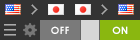
<style>
.page{position:relative;width:140px;height:40px;background:#333333}
.page>*{position:absolute;margin:0}
.t1{font:10px "CenturyGothic-Bold";letter-spacing:0.03em;color:#ffffff;text-transform:uppercase}
</style>
<div class="page">
<p class="t1" style="left:51px;top:26px;width:18px;height:8px">off</p>
<p class="t1" style="left:112px;top:26px;width:16px;height:8px">on</p>
</div>
